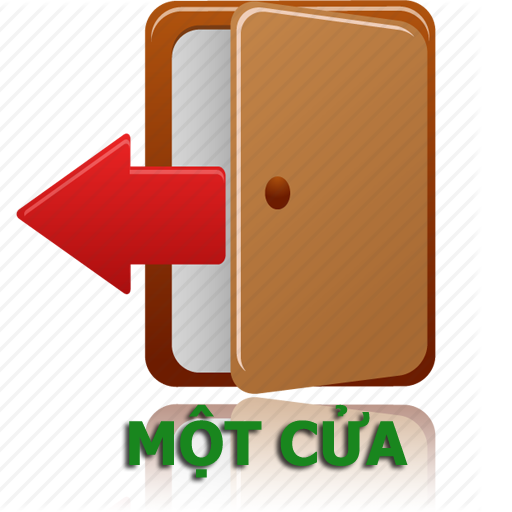
<style>
.page{position:relative;width:512px;height:512px;background:#ffffff}
.page>*{position:absolute;margin:0}
.t1{font:60px "Tahoma-Bold";color:#19861e}
</style>
<div class="page">
<p class="t1" style="left:129px;top:404px;width:279px;height:74px">MỘT CỬA</p>
</div>
